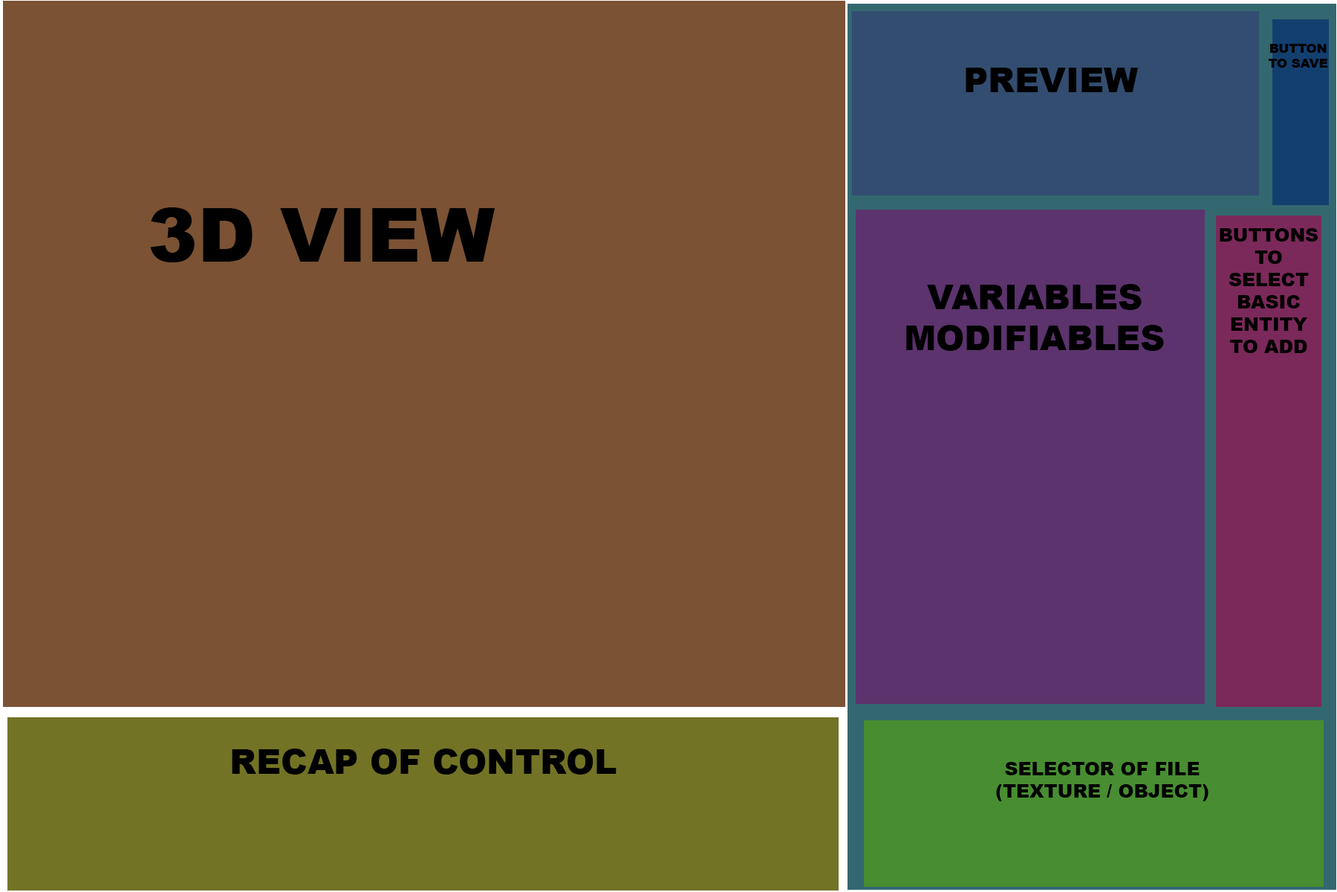
<style>
.page{position:relative;width:1337px;height:892px;background:#7b5233}
.page>*{position:absolute;margin:0}
.t1{font:12.4px "Arial-Black";color:#000000;text-transform:uppercase}
.t2{font:34.1px "Arial-Black";color:#000000;text-transform:uppercase}
.t3{font:18.6px "Arial-Black";color:#000000;text-transform:uppercase}
</style>
<div class="page">
<p class="t1" style="left:1268px;top:44px;width:60px;height:24px;text-align:center">Button to Save</p>
<p class="t2" style="left:966px;top:68px;width:172px;height:24px">Preview</p>
<p class="t3" style="left:1220px;top:228px;width:99px;height:125px;text-align:center">Buttons to select basic entity<br>to add</p>
<p class="t2" style="left:906px;top:284px;width:258px;height:67px;text-align:center">Variables <br>modifiables</p>
<p class="t2" style="left:232px;top:748px;width:385px;height:26px">Recap of control</p>
<p class="t3" style="left:996px;top:762px;width:213px;height:39px;text-align:center">Selector of file<br>(Texture / Object)</p>
</div>
